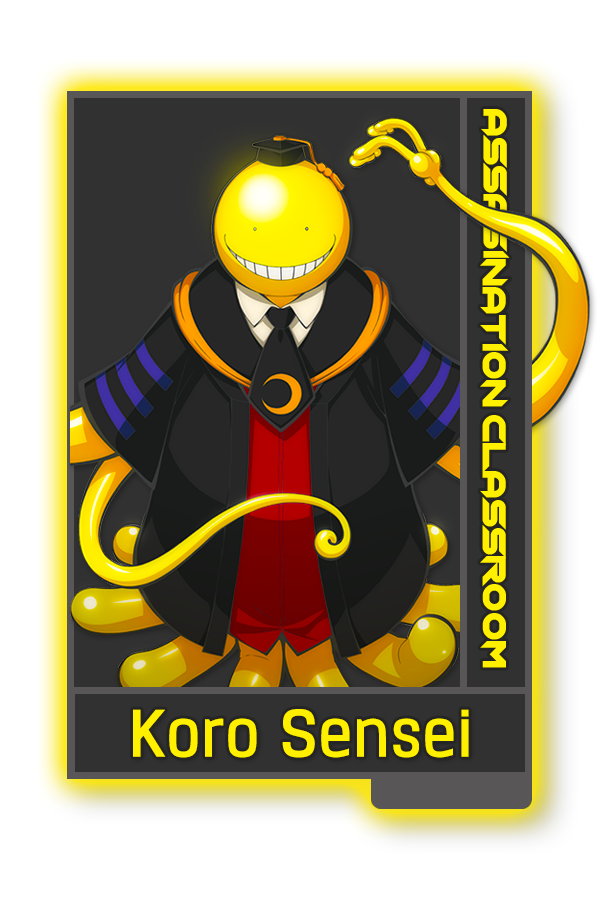
<style>
.page{position:relative;width:600px;height:900px;background:#ffffff}
.page>*{position:absolute;margin:0}
.t1{font:34px "Chopsic";color:#fff000}
.t2{font:75px "Hurufo&NumeroBold";color:#fff000}
</style>
<div class="page">
<p class="t1" style="left:481px;top:109px;width:29px;height:559px;rotate:90deg">Assasination ClassROOM</p>
<p class="t2" style="left:133px;top:709px;width:336px;height:49px">Koro Sensei</p>
</div>
